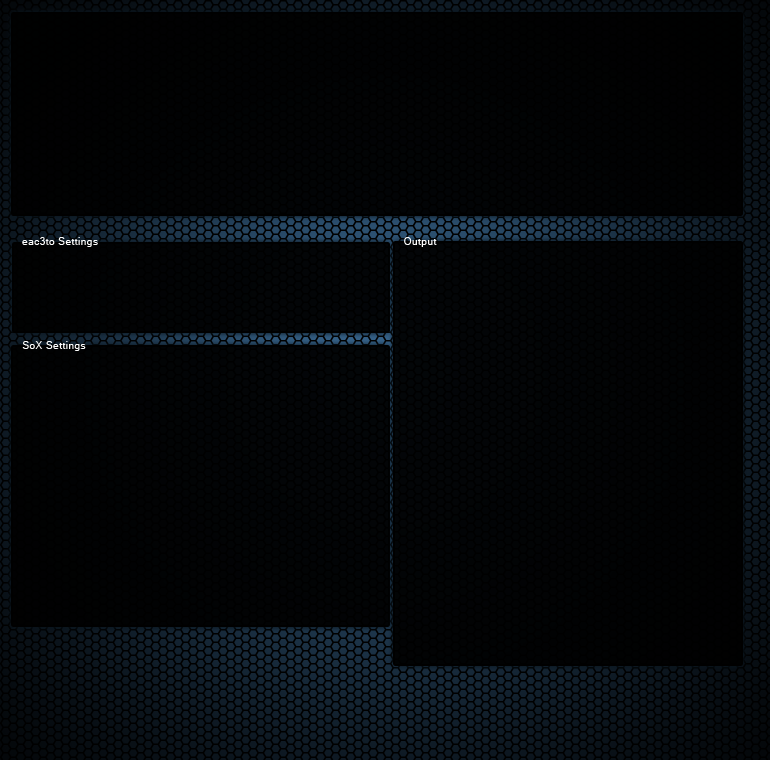
<style>
.page{position:relative;width:770px;height:760px}
.page>*{position:absolute;margin:0}
.t1{font:10px "MicrosoftSansSerif";letter-spacing:0.05em;color:#fefefe}
</style>
<div class="page">
<p class="t1" style="left:22px;top:237px;width:76px;height:10px">eac3to Settings</p>
<p class="t1" style="left:404px;top:237px;width:33px;height:10px">Output</p>
<p class="t1" style="left:22px;top:341px;width:64px;height:10px">SoX Settings</p>
</div>
